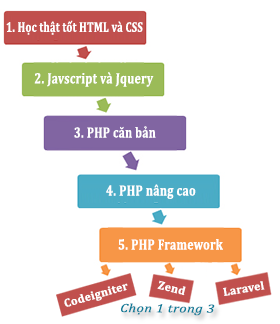
<style>
.page{position:relative;width:280px;height:324px;background:#ffffff}
.page>*{position:absolute;margin:0}
.t1{font:14.1px "Cambria-Bold";letter-spacing:0.025em;color:#ffffff;scale:0.74 1}
.t2{font:15.2px "Cambria-Bold";letter-spacing:0.025em;color:#ffffff;scale:0.77 1}
.t3{font:15px "Cambria-Bold";letter-spacing:0.025em;color:#ffffff;scale:0.77 1}
.t4{font:15px "Cambria-Bold";letter-spacing:0.025em;color:#ffffff;scale:0.78 1}
.t5{font:11.8px "Cambria-Bold";letter-spacing:0.025em;color:#ffffff}
.t6{font:12px "Cambria-Italic";letter-spacing:0.025em;color:#0e7d9a;scale:1.22 1}
</style>
<div class="page">
<p class="t1" style="left:6px;top:20px;width:137px;height:15px">1. Học thật tốt HTML và CSS</p>
<p class="t2" style="left:34px;top:72px;width:120px;height:15px">2. Javscript và Jquery</p>
<p class="t3" style="left:74px;top:126px;width:82px;height:12px">3. PHP căn bản</p>
<p class="t4" style="left:106px;top:184px;width:90px;height:15px">4. PHP nâng cao</p>
<p class="t4" style="left:118px;top:239px;width:105px;height:11px">5. PHP Framework</p>
<p class="t5" style="left:157px;top:280px;width:29px;height:16px;rotate:14deg">Zend</p>
<p class="t5" style="left:223px;top:281px;width:42px;height:15px;rotate:-10deg">Laravel</p>
<p class="t5" style="left:64px;top:283px;width:64px;height:24px;rotate:-16deg">Codeigniter</p>
<p class="t6" style="left:121px;top:303px;width:94px;height:13px">Chọn 1 trong 3</p>
</div>
